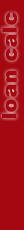
<style>
.page{position:relative;width:24px;height:230px;background:#a40810}
.page>*{position:absolute;margin:0}
.t1{font:20px "Arial-Black";letter-spacing:0.02em;color:#a40810;font-weight:bold}
</style>
<div class="page">
<p class="t1" style="left:2px;top:12px;width:15px;height:107px;rotate:-90deg">loan calc</p>
</div>
